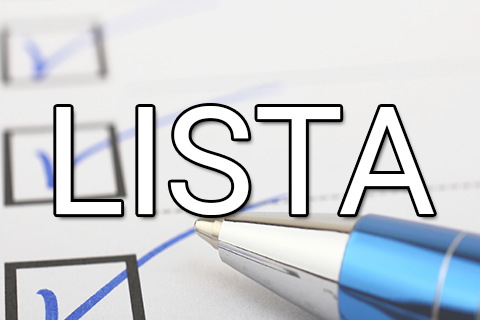
<style>
.page{position:relative;width:480px;height:320px}
.page>*{position:absolute;margin:0}
.t1{font:150px "Roboto-Regular";color:#ffffff}
</style>
<div class="page">
<p class="t1" style="left:56px;top:106px;width:378px;height:109px">LISTA</p>
</div>
